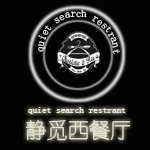
<style>
.page{position:relative;width:150px;height:150px;background:#030303}
.page>*{position:absolute;margin:0}
.t1{font:10.7px "SimSun";color:#e7e4e4}
.t2{font:9.3px "YouYuan";color:#e7e4e4}
.t3{font:21.3px "YouYuan";color:#e7e4e4}
</style>
<div class="page">
<p class="t1" style="left:38px;top:9px;width:82px;height:45px;rotate:23deg">quiet search restrant</p>
<p class="t2" style="left:28px;top:107px;width:98px;height:7px">quiet search restrant</p>
<p class="t3" style="left:26px;top:120px;width:105px;height:21px">静觅西餐厅</p>
</div>
